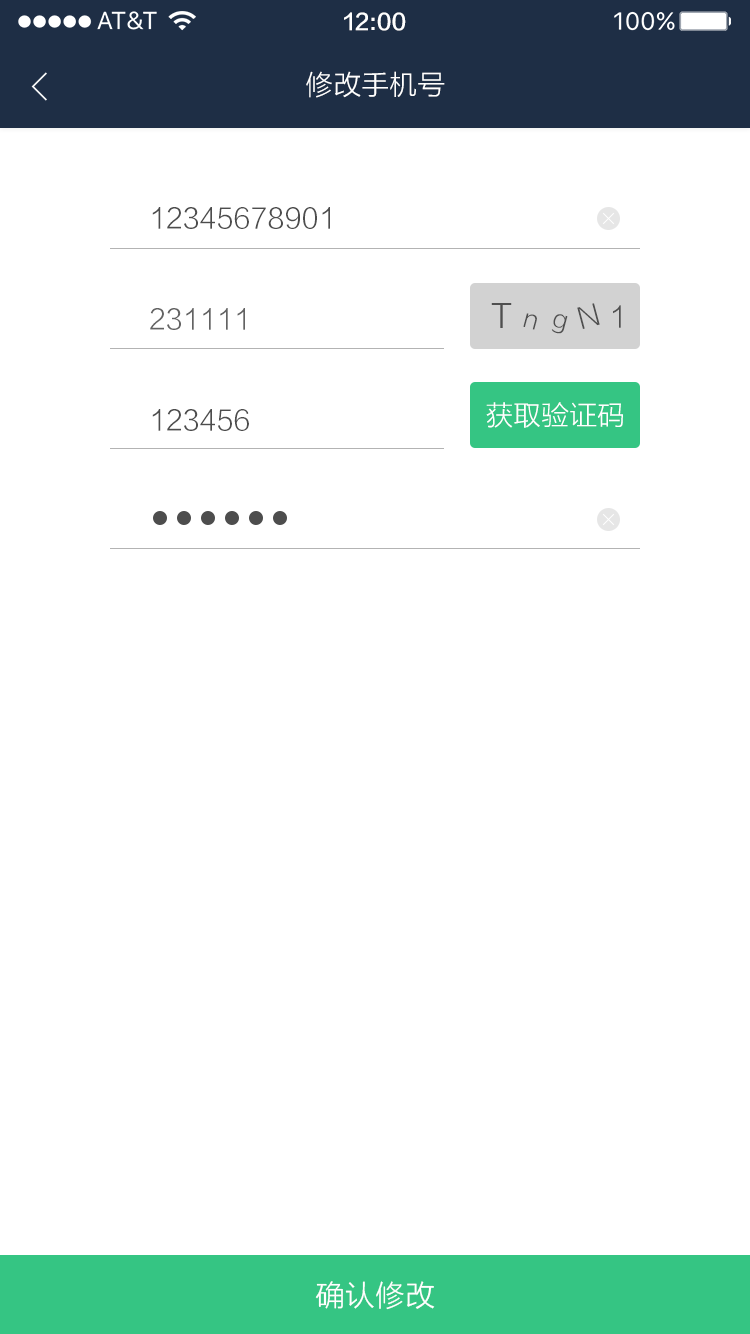
<style>
.page{position:relative;width:750px;height:1334px;background:#ffffff}
.page>*{position:absolute;margin:0}
.t1{font:22px "FZLTZHK--GBK1-0";color:#ffffff}
.t2{font:28px "FZLTXHK";color:#ffffff}
.t3{font:28px "FZLTXHK";color:#4d4d4d}
.t4{font:32.8px "FZLTXHK";color:#4f4f4f}
.t5{font:28.9px "FZLTXHK";color:#4f4f4f}
.t6{font:28px "FZLTXHK";color:#636363}
.t7{font:25.3px "FZLTXHK";color:#4f4f4f}
.t8{font:30px "FZLTXHK";color:#ffffff}
</style>
<div class="page">
<p class="t1" style="left:344px;top:12px;width:62px;height:19px">12:00</p>
<p class="t2" style="left:306px;top:71px;width:139px;height:27px">修改手机号</p>
<p class="t3" style="left:152px;top:207px;width:178px;height:22px">12345678901</p>
<p class="t4" style="left:491px;top:303px;width:21px;height:25px">T</p>
<p class="t5" style="left:577px;top:303px;width:23px;height:26px;rotate:-15deg">N</p>
<p class="t5" style="left:613px;top:305px;width:8px;height:23px">1</p>
<p class="t6" style="left:150px;top:308px;width:95px;height:22px">231111</p>
<p class="t7" style="left:523px;top:313px;width:14px;height:17px;rotate:15deg">n</p>
<p class="t7" style="left:551px;top:314px;width:17px;height:20px;rotate:15deg">g</p>
<p class="t3" style="left:152px;top:409px;width:97px;height:22px">123456</p>
<p class="t2" style="left:486px;top:402px;width:137px;height:26px">获取验证码</p>
<p class="t8" style="left:315px;top:1281px;width:120px;height:29px">确认修改</p>
</div>
